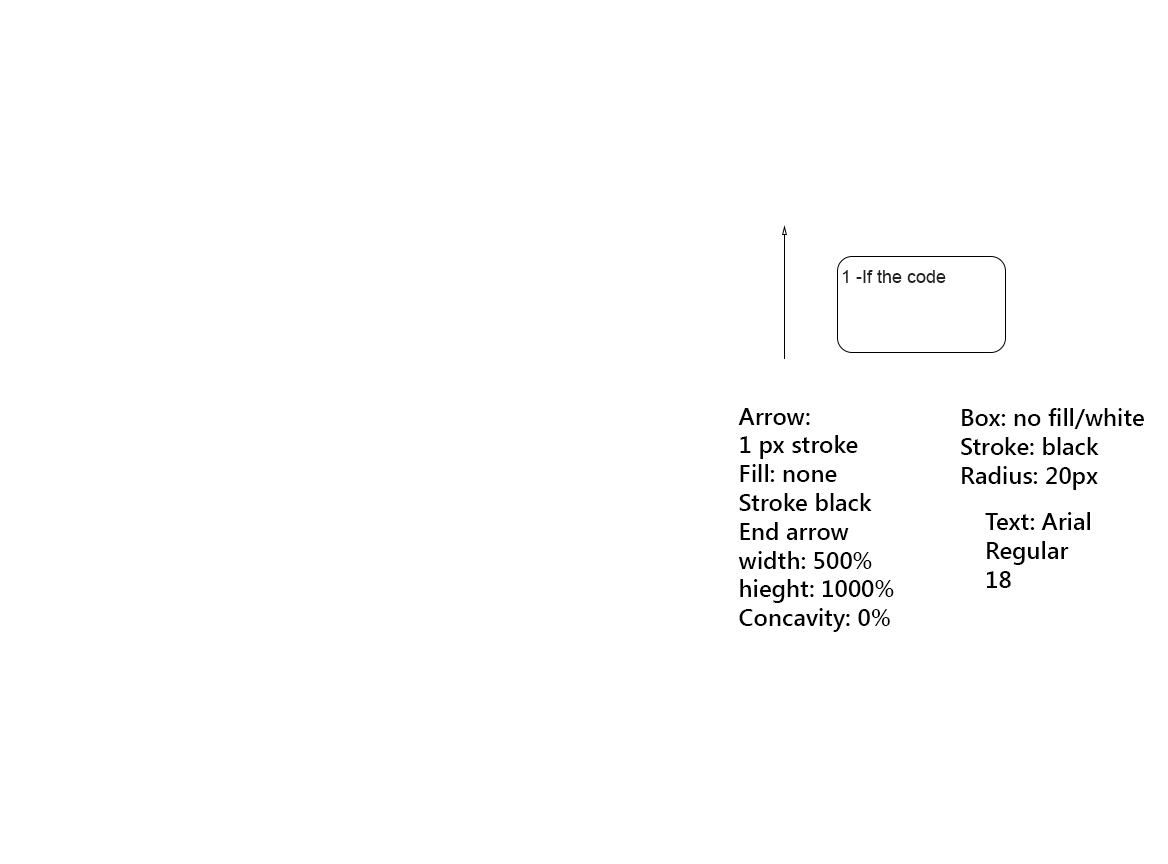
<style>
.page{position:relative;width:1168px;height:864px;background:#ffffff}
.page>*{position:absolute;margin:0}
.t1{font:18px "ArialMT";color:#222121}
.t2{font:18px "MyriadPro-Regular";color:#000000}
.t3{font:24px "SegoeUI-SemiBold";color:#000000}
</style>
<div class="page">
<p class="t1" style="left:842px;top:270px;width:104px;height:13px"><span class="t2"><br></span>1 -If the code</p>
<p class="t3" style="left:738px;top:408px;width:156px;height:224px">Arrow:<br>1 px stroke<br>Fill: none<br>Stroke black<br>End arrow<br>width: 500%<br>hieght: 1000%<br>Concavity: 0%</p>
<p class="t3" style="left:961px;top:408px;width:183px;height:82px">Box: no fill/white<br>Stroke: black<br>Radius: 20px</p>
<p class="t3" style="left:985px;top:512px;width:105px;height:76px">Text: Arial<br>Regular<br>18</p>
</div>
